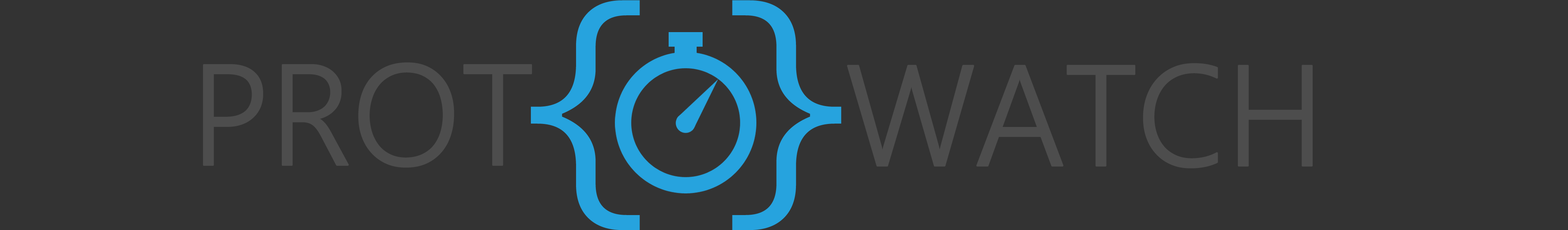
<style>
.page{position:relative;width:1568px;height:230px;background:#333333}
.page>*{position:absolute;margin:0}
.t1{font:238.6px "Meiryo";letter-spacing:-0.04em;color:#26a3de}
.t2{font:143.1px "MicrosoftMHei";color:#4d4d4d}
.t3{font:143.1px "MicrosoftMHei";letter-spacing:-0.01em;color:#4d4d4d}
</style>
<div class="page">
<p class="t1" style="left:531px;top:0px;width:310px;height:230px">{ }</p>
<p class="t2" style="left:203px;top:63px;width:328px;height:104px">PROT</p>
<p class="t3" style="left:848px;top:64px;width:464px;height:104px">WAT<span class="t2">CH</span></p>
</div>
